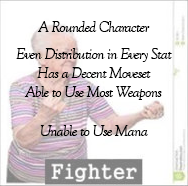
<style>
.page{position:relative;width:188px;height:186px;background:#ffffff}
.page>*{position:absolute;margin:0}
.t1{font:16px "GoudyOldStyleT-Italic";letter-spacing:-0.05em;color:#010101}
</style>
<div class="page">
<p class="t1" style="left:16px;top:21px;width:156px;height:115px;text-align:center">A Rounded Character<br><br>Even Distribution in Every Stat<br>Has a Decent Moveset<br>Able to Use Most Weapons<br><br>Unable to Use Mana</p>
</div>
